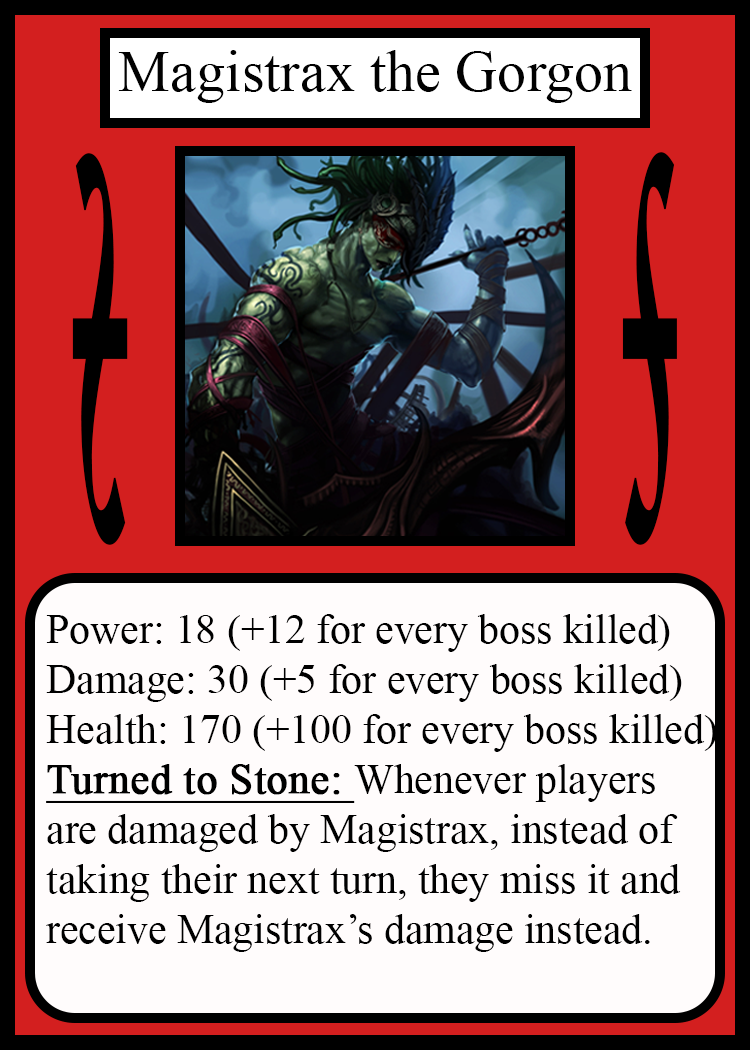
<style>
.page{position:relative;width:750px;height:1050px;background:#fffcfc}
.page>*{position:absolute;margin:0}
.t1{font:58.3px "TimesNewRomanPSMT";color:#010101}
.t2{font:814.3px "Apple-Chancery";color:#000000;font-weight:bold;scale:0.17 1}
.t3{font:814.6px "Apple-Chancery";color:#000000;font-weight:bold;scale:0.17 1}
.t4{font:41.7px "TimesNewRomanPSMT";color:#000000}
.t5{font:41.7px "TimesNewRomanPSMT";color:#000000;font-weight:bold;text-decoration:underline}
</style>
<div class="page">
<p class="t1" style="left:118px;top:50px;width:514px;height:53px">Magistrax the Gorgon</p>
<p class="t2" style="left:72px;top:153px;width:56px;height:392px;rotate:180deg">s</p>
<p class="t3" style="left:622px;top:152px;width:55px;height:393px">s</p>
<p class="t4" style="left:46px;top:614px;width:671px;height:338px">Power: 18 (+12 for every boss killed)<br>Damage: 30 (+5 for every boss killed)<br>Health: 170 (+100 for every boss killed)<br><span class="t5">Turned to Stone: </span>Whenever players<br>are damaged by Magistrax, instead of<br>taking their next turn, they miss it and<br>receive Magistrax’s damage instead.</p>
</div>
